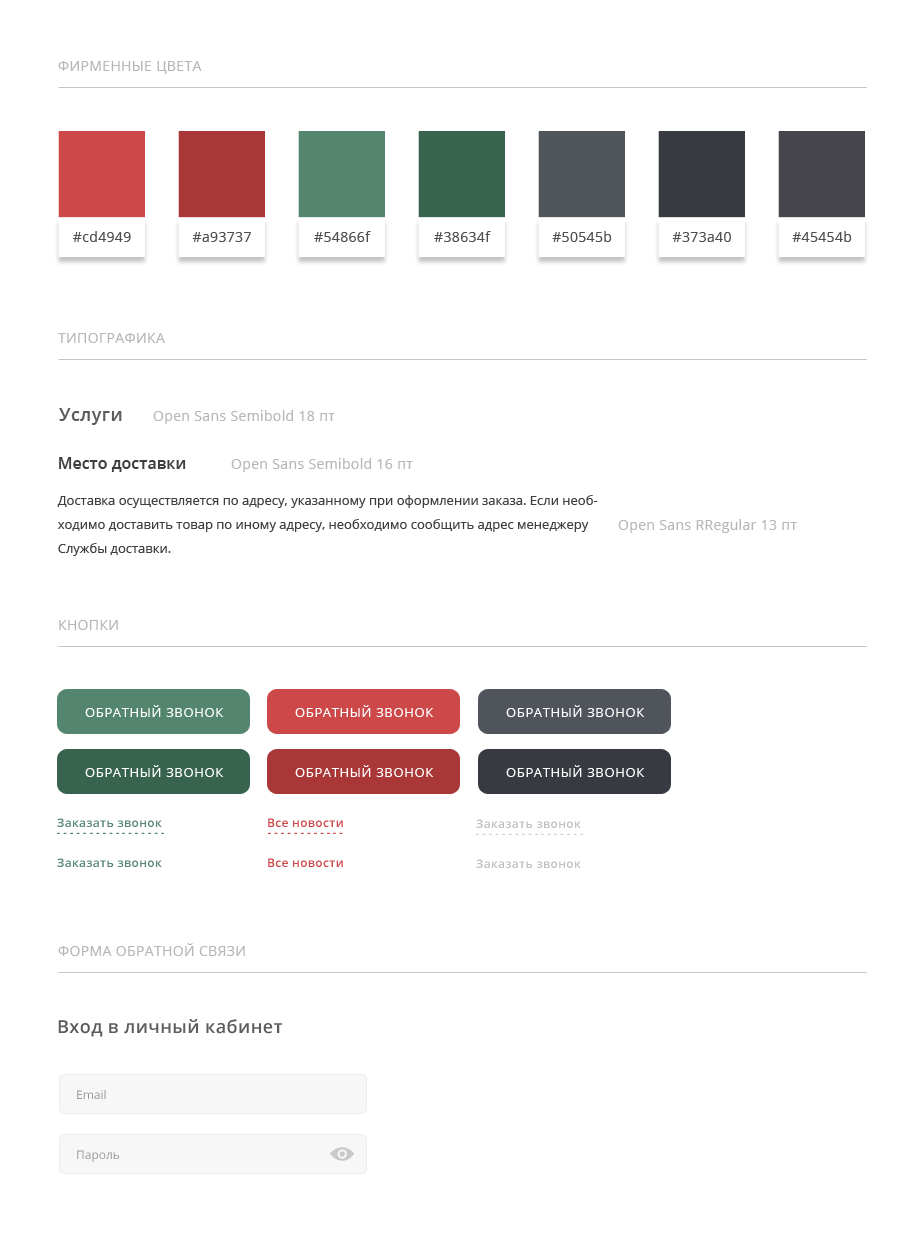
<style>
.page{position:relative;width:924px;height:1260px;background:#ffffff}
.page>*{position:absolute;margin:0}
.t1{font:14px "OpenSans";letter-spacing:0.025em;color:#b7b7b7;text-transform:uppercase}
.t2{font:14px "OpenSans";letter-spacing:0.025em;color:#4f4f4f}
.t3{font:18px "OpenSans-Semibold";letter-spacing:0.025em;color:#5c5c5c}
.t4{font:14px "OpenSans";letter-spacing:0.025em;color:#b7b7b7}
.t5{font:13px/24px "OpenSans";color:#3f3f3f}
.t6{font:16px/36px "OpenSans-Semibold";color:#3f3f3f}
.t7{font:13px/36px "OpenSans";color:#3f3f3f}
.t8{font:13px "OpenSans";letter-spacing:0.05em;color:#ffffff;text-transform:uppercase}
.t9{font:12px "OpenSans-Semibold";letter-spacing:0.025em;color:#54866f}
.t10{font:12px "OpenSans-Semibold";letter-spacing:0.025em;color:#cd4949}
.t11{font:12px "OpenSans-Semibold";letter-spacing:0.025em;color:#bfbfbf}
.t12{font:12px "OpenSans";color:#989898}
</style>
<div class="page">
<p class="t1" style="left:58px;top:61px;width:144px;height:13px">фирменные цвета</p>
<p class="t2" style="left:73px;top:231px;width:58px;height:11px">#cd4949</p>
<p class="t2" style="left:192px;top:232px;width:59px;height:10px">#a93737</p>
<p class="t2" style="left:314px;top:231px;width:57px;height:11px">#54866f</p>
<p class="t2" style="left:434px;top:231px;width:57px;height:11px">#38634f</p>
<p class="t2" style="left:552px;top:231px;width:60px;height:11px">#50545b</p>
<p class="t2" style="left:672px;top:232px;width:59px;height:10px">#373a40</p>
<p class="t2" style="left:792px;top:231px;width:60px;height:11px">#45454b</p>
<p class="t1" style="left:58px;top:333px;width:107px;height:10px">типографика</p>
<p class="t3" style="left:59px;top:408px;width:63px;height:17px">Услуги</p>
<p class="t4" style="left:153px;top:410px;width:182px;height:14px">Open Sans Semibold 18 пт</p>
<p class="t5" style="left:57px;top:457px;width:541px;height:99px"><span class="t6">Место доставки<br></span><span class="t7">Доставка осуществляется по адресу, указанному при оформлении заказа. Если необ</span>ходимо доставить товар по иному адресу, необходимо сообщить адрес менеджеру Службы доставки.</p>
<p class="t4" style="left:231px;top:458px;width:182px;height:14px">Open Sans Semibold 16 пт</p>
<p class="t4" style="left:618px;top:519px;width:179px;height:14px">Open Sans RRegular 13 пт</p>
<p class="t1" style="left:59px;top:620px;width:59px;height:10px">кнопки</p>
<p class="t8" style="left:85px;top:705px;width:139px;height:12px">обратный звонок</p>
<p class="t8" style="left:295px;top:705px;width:139px;height:12px">обратный звонок</p>
<p class="t8" style="left:506px;top:705px;width:139px;height:12px">обратный звонок</p>
<p class="t8" style="left:85px;top:765px;width:139px;height:12px">обратный звонок</p>
<p class="t8" style="left:295px;top:765px;width:139px;height:12px">обратный звонок</p>
<p class="t8" style="left:506px;top:765px;width:139px;height:12px">обратный звонок</p>
<p class="t9" style="left:57px;top:818px;width:105px;height:9px">Заказать звонок</p>
<p class="t10" style="left:268px;top:818px;width:75px;height:9px">Все новости</p>
<p class="t11" style="left:476px;top:819px;width:105px;height:9px">Заказать звонок</p>
<p class="t9" style="left:57px;top:858px;width:105px;height:9px">Заказать звонок</p>
<p class="t10" style="left:268px;top:858px;width:75px;height:9px">Все новости</p>
<p class="t11" style="left:476px;top:859px;width:105px;height:9px">Заказать звонок</p>
<p class="t1" style="left:58px;top:943px;width:187px;height:13px">форма обратной связи</p>
<p class="t3" style="left:58px;top:1019px;width:225px;height:18px">Вход в личный кабинет</p>
<p class="t12" style="left:77px;top:1090px;width:29px;height:9px">Email</p>
<p class="t12" style="left:77px;top:1150px;width:42px;height:12px">Пароль</p>
</div>
